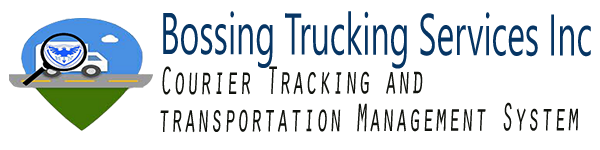
<style>
.page{position:relative;width:600px;height:150px;background:#ffffff}
.page>*{position:absolute;margin:0}
.t1{font:58.7px "LeelawadeeUI";color:#063564;scale:0.57 1}
.t2{font:41.2px "OratorStd";color:#10120d;scale:0.53 1}
</style>
<div class="page">
<p class="t1" style="left:163px;top:11px;width:428px;height:58px">Bossing Trucking Services Inc</p>
<p class="t2" style="left:162px;top:66px;width:261px;height:29px">Courier Tracking and</p>
<p class="t2" style="left:160px;top:102px;width:418px;height:31px">transportation Management System</p>
</div>
